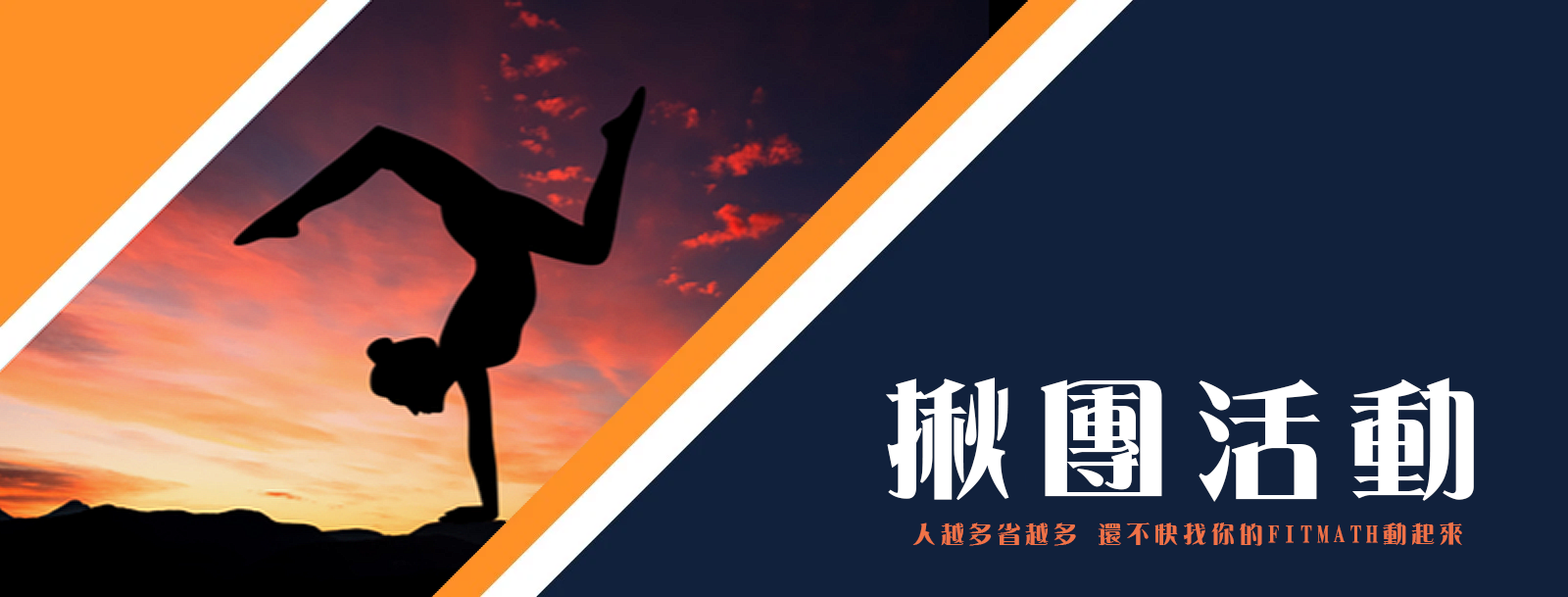
<style>
.page{position:relative;width:1568px;height:597px;background:#11213c}
.page>*{position:absolute;margin:0}
.t1{font:129.4px "DFYeaSong-W9-WIN-BF";letter-spacing:0.2em;color:#ffffff}
.t2{font:23.5px "DFYeaSong-W9-WIN-BF";letter-spacing:0.2em;color:#f07247}
</style>
<div class="page">
<p class="t1" style="left:886px;top:377px;width:588px;height:125px">揪團活動</p>
<p class="t2" style="left:912px;top:521px;width:550px;height:25px">人越多省越多 還不快找你的FITMATH動起來</p>
</div>
